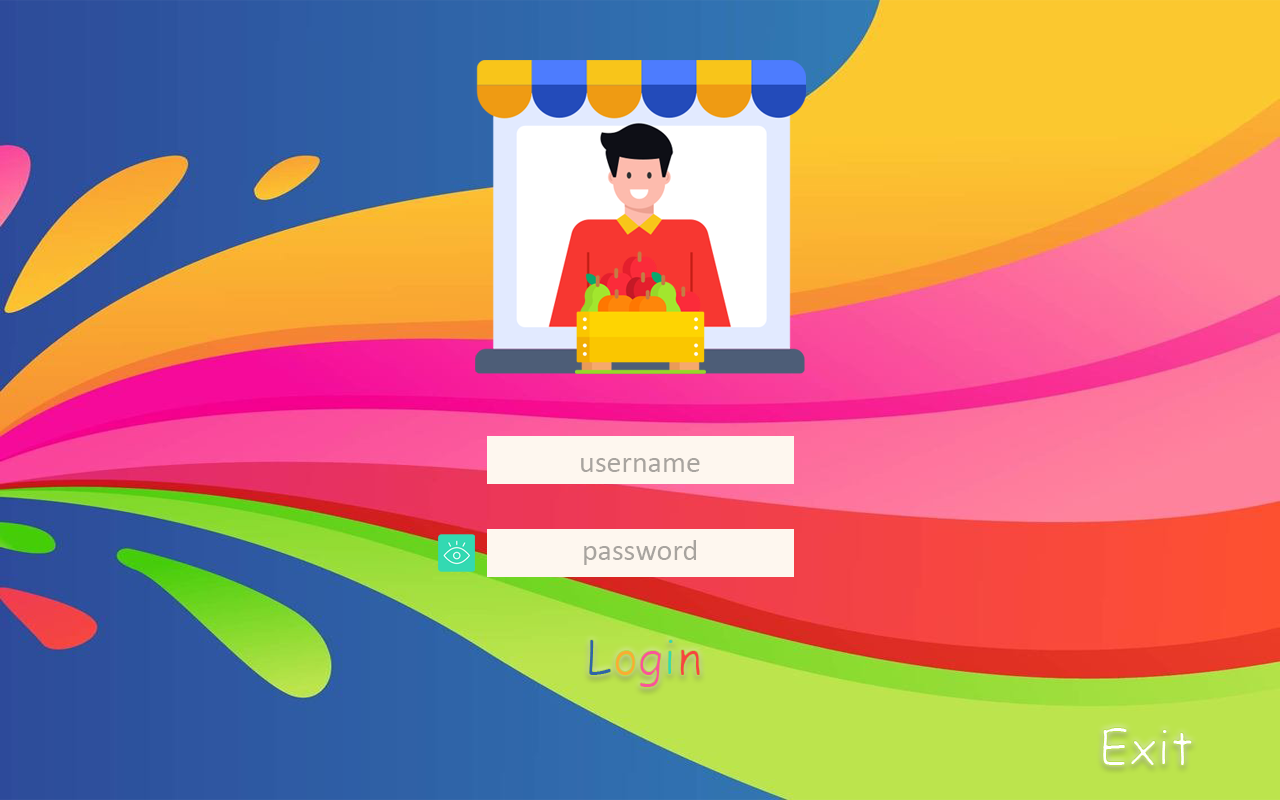
<style>
.page{position:relative;width:1280px;height:800px}
.page>*{position:absolute;margin:0}
.t1{font:30px "Calibri";color:#a8a49f}
.t2{font:48px "ComicSansMS"}
</style>
<div class="page">
<p class="t1" style="left:581px;top:458px;width:119px;height:14px">username</p>
<p class="t1" style="left:584px;top:540px;width:112px;height:25px">password</p>
<p class="t2" style="left:588px;top:639px;width:113px;height:49px">Login</p>
<p class="t2" style="left:1102px;top:727px;width:91px;height:39px">Exit</p>
</div>
